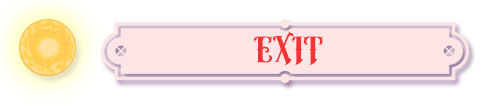
<style>
.page{position:relative;width:484px;height:106px;background:#ffffff}
.page>*{position:absolute;margin:0}
.t1{font:41.7px "Moyers";color:#f23434}
</style>
<div class="page">
<p class="t1" style="left:254px;top:31px;width:70px;height:34px">EXIT</p>
</div>
